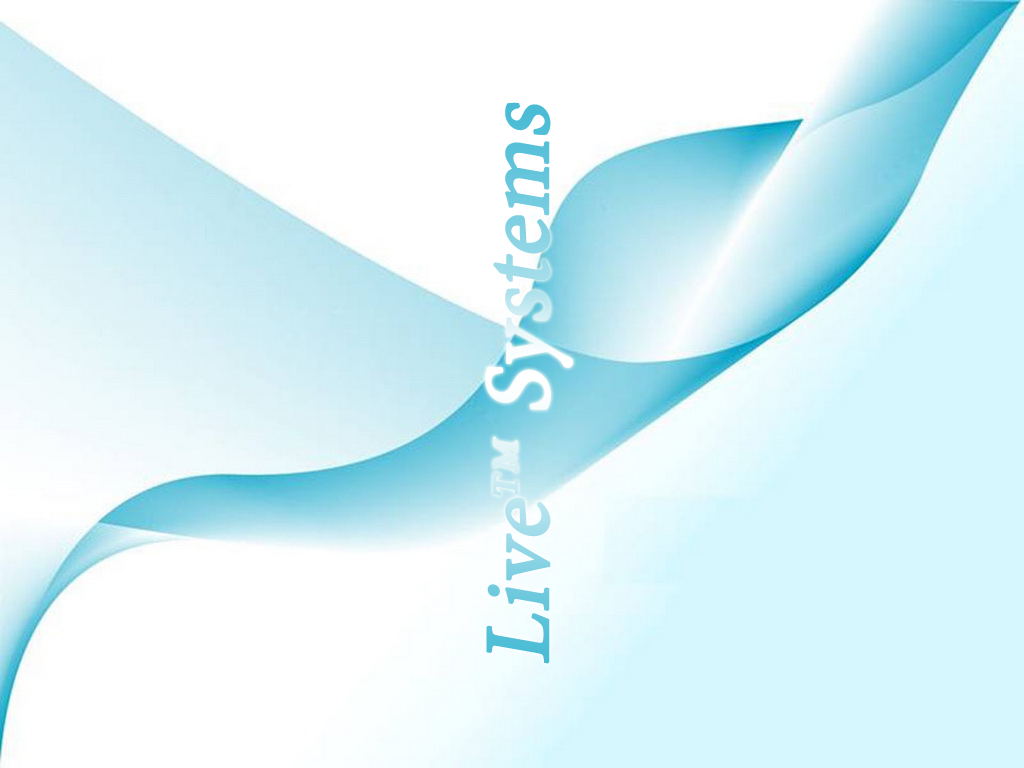
<style>
.page{position:relative;width:1024px;height:768px;background:#ffffff}
.page>*{position:absolute;margin:0}
.t1{font:92.2px "MinionPro-Regular";font-weight:bold;font-style:italic}
</style>
<div class="page">
<p class="t1" style="left:485px;top:102px;width:88px;height:562px;rotate:-90deg">Liveтм Systems</p>
</div>
